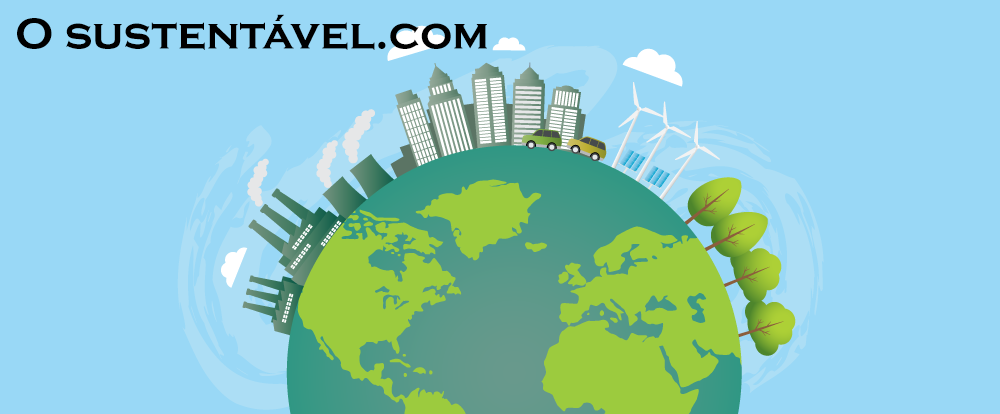
<style>
.page{position:relative;width:1000px;height:414px;background:#99d8f6}
.page>*{position:absolute;margin:0}
.t1{font:45px "CopperplateGothic-Bold";color:#000000}
</style>
<div class="page">
<p class="t1" style="left:17px;top:14px;width:470px;height:36px">O sustentável.com</p>
</div>
